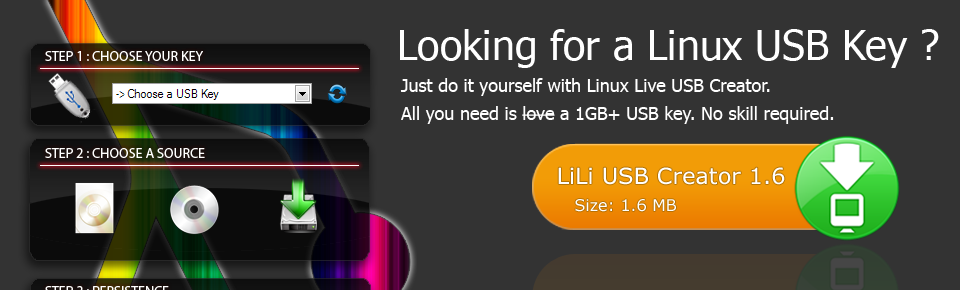
<style>
.page{position:relative;width:960px;height:290px;background:#333333}
.page>*{position:absolute;margin:0}
.t1{font:41px "Tahoma";color:#ffffff}
.t2{font:18px/28px "Tahoma";color:#ffffff}
.t3{font:22.4px "Verdana";color:#ffffff}
.t4{font:16px "Verdana";color:#ffffff}
</style>
<div class="page">
<p class="t1" style="left:400px;top:29px;width:539px;height:39px">Looking for a Linux USB Key ?</p>
<p class="t2" style="left:400px;top:78px;width:434px;height:46px">Just do it yourself with Linux Live USB Creator. <br>All you need is love a 1GB+ USB key. No skill required.</p>
<p class="t3" style="left:558px;top:167px;width:227px;height:18px">LiLi USB Creator 1.6</p>
<p class="t4" style="left:575px;top:199px;width:101px;height:13px">Size: 1.6 MB</p>
</div>
